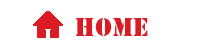
<style>
.page{position:relative;width:199px;height:50px;background:#ffffff}
.page>*{position:absolute;margin:0}
.t1{font:23.9px "StencilStd";color:#dc1c25}
</style>
<div class="page">
<p class="t1" style="left:76px;top:18px;width:72px;height:18px">HOME</p>
</div>
